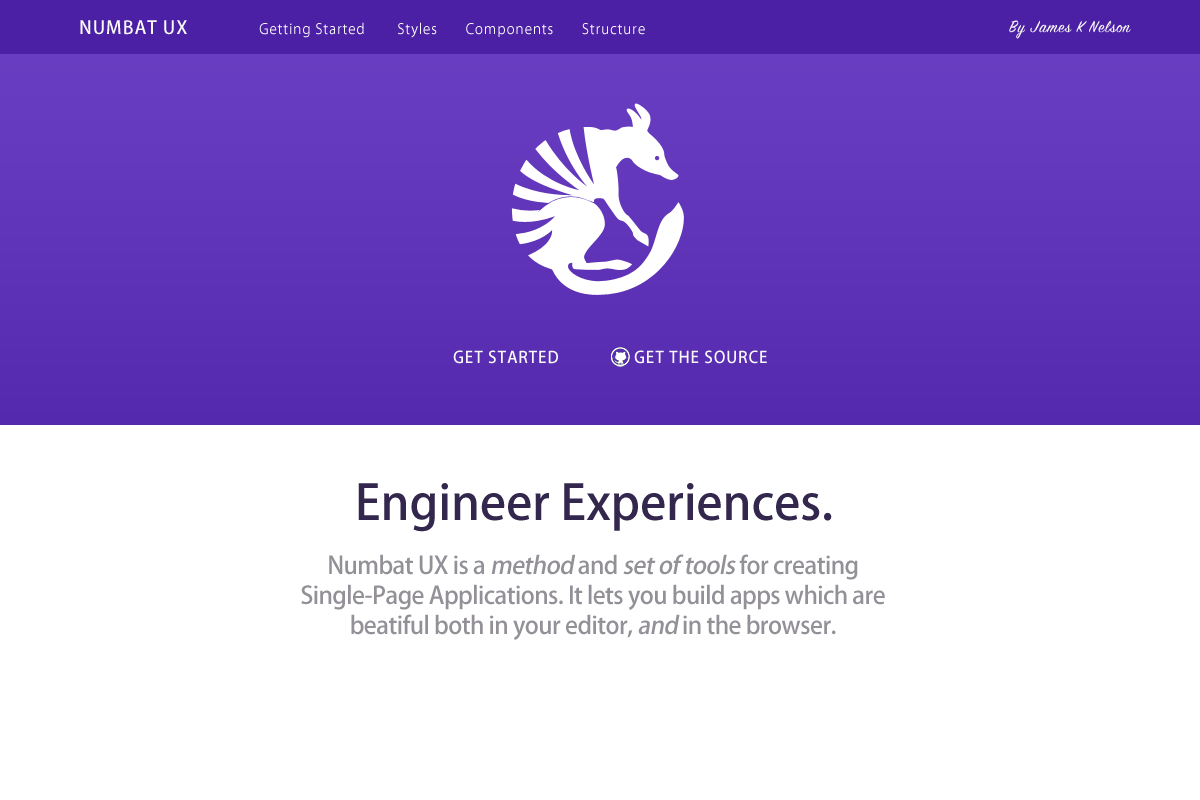
<style>
.page{position:relative;width:1200px;height:800px;background:#ffffff}
.page>*{position:absolute;margin:0}
.t1{font:14px "KozGoPro-Regular";letter-spacing:0.05em;color:#f8f8f8}
.t2{font:18px "KozGoPro-Medium";letter-spacing:0.05em;color:#f8f8f8}
.t3{font:18px "SignPainter-HouseScript";letter-spacing:0.05em;color:#f8f8f8}
.t4{font:16px "KozGoPro-Medium";letter-spacing:0.05em;color:#f8f8f8}
.t5{font:48px "KozGoPro-Medium";color:#33274d}
.t6{font:24px/30px "KozGoPro-Medium";letter-spacing:-0.025em;color:#939097}
.t7{font:24px/30px "KozGoPro-Medium";letter-spacing:-0.025em;color:#939097;font-style:italic}
</style>
<div class="page">
<p class="t1" style="left:80px;top:20px;width:565px;height:18px"><span class="t2">NUMBAT UX  </span>Getting Started        Styles       Components       Structure</p>
<p class="t3" style="left:1009px;top:20px;width:122px;height:19px">By James K Nelson</p>
<p class="t4" style="left:453px;top:350px;width:105px;height:14px">GET STARTED</p>
<p class="t4" style="left:634px;top:350px;width:133px;height:14px">GET THE SOURCE</p>
<p class="t5" style="left:358px;top:483px;width:474px;height:49px">Engineer Experiences.</p>
<p class="t6" style="left:301px;top:554px;width:584px;height:86px;text-align:center">Numbat UX is a <span class="t7">method </span>and <span class="t7">set of tools</span> for creating<br>Single-Page Applications. It lets you build apps which are<br>beatiful both in your editor, <span class="t7">and</span> in the browser.</p>
</div>
